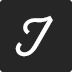
<style>
.page{position:relative;width:72px;height:72px;background:#262626}
.page>*{position:absolute;margin:0}
.t1{font:48px "Wisdom-Script";color:#ffffff}
</style>
<div class="page">
<p class="t1" style="left:15px;top:15px;width:38px;height:42px">T</p>
</div>
